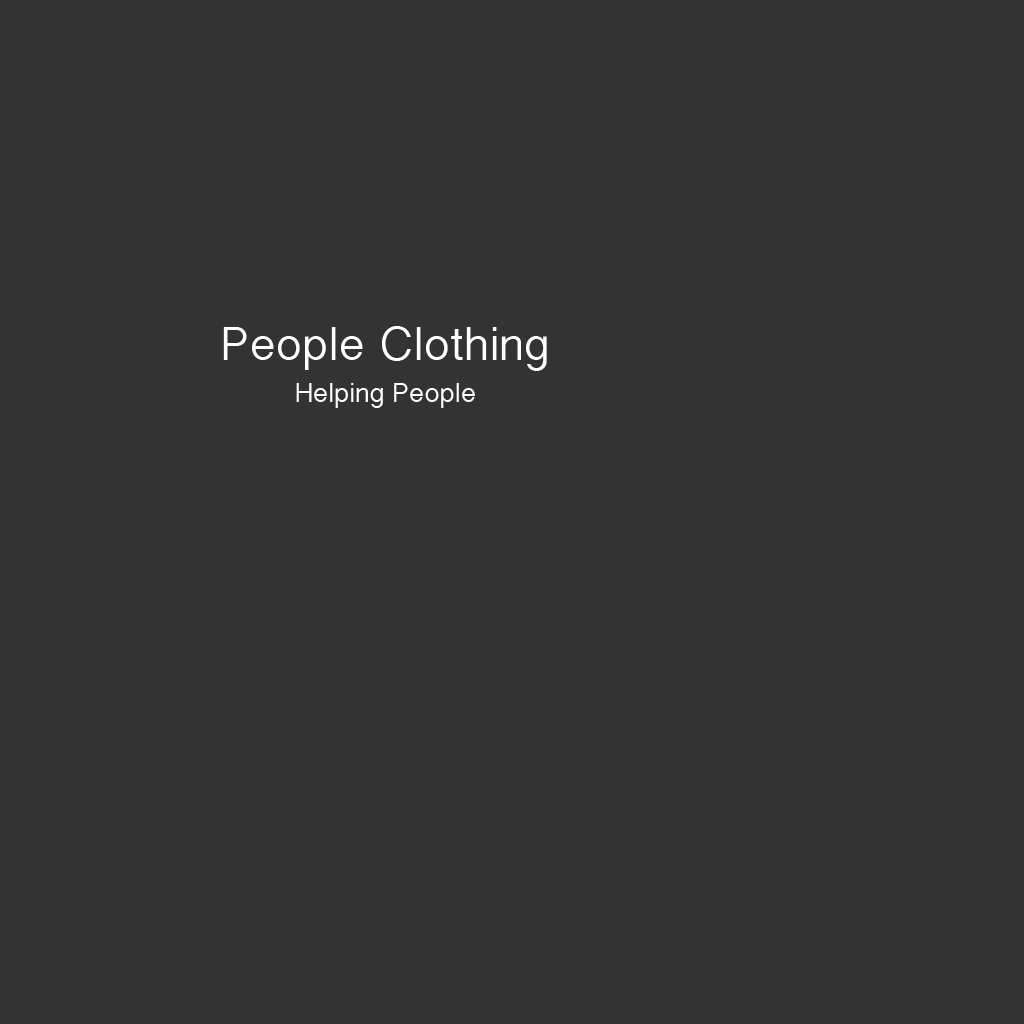
<style>
.page{position:relative;width:1024px;height:1024px;background:#333333}
.page>*{position:absolute;margin:0}
.t1{font:48px "MyanmarSangamMN";color:#ffffff}
.t2{font:28px "MyanmarSangamMN";color:#ffffff}
</style>
<div class="page">
<p class="t1" style="left:223px;top:326px;width:324px;height:45px">People Clothing</p>
<p class="t2" style="left:296px;top:383px;width:179px;height:25px">Helping People</p>
</div>
